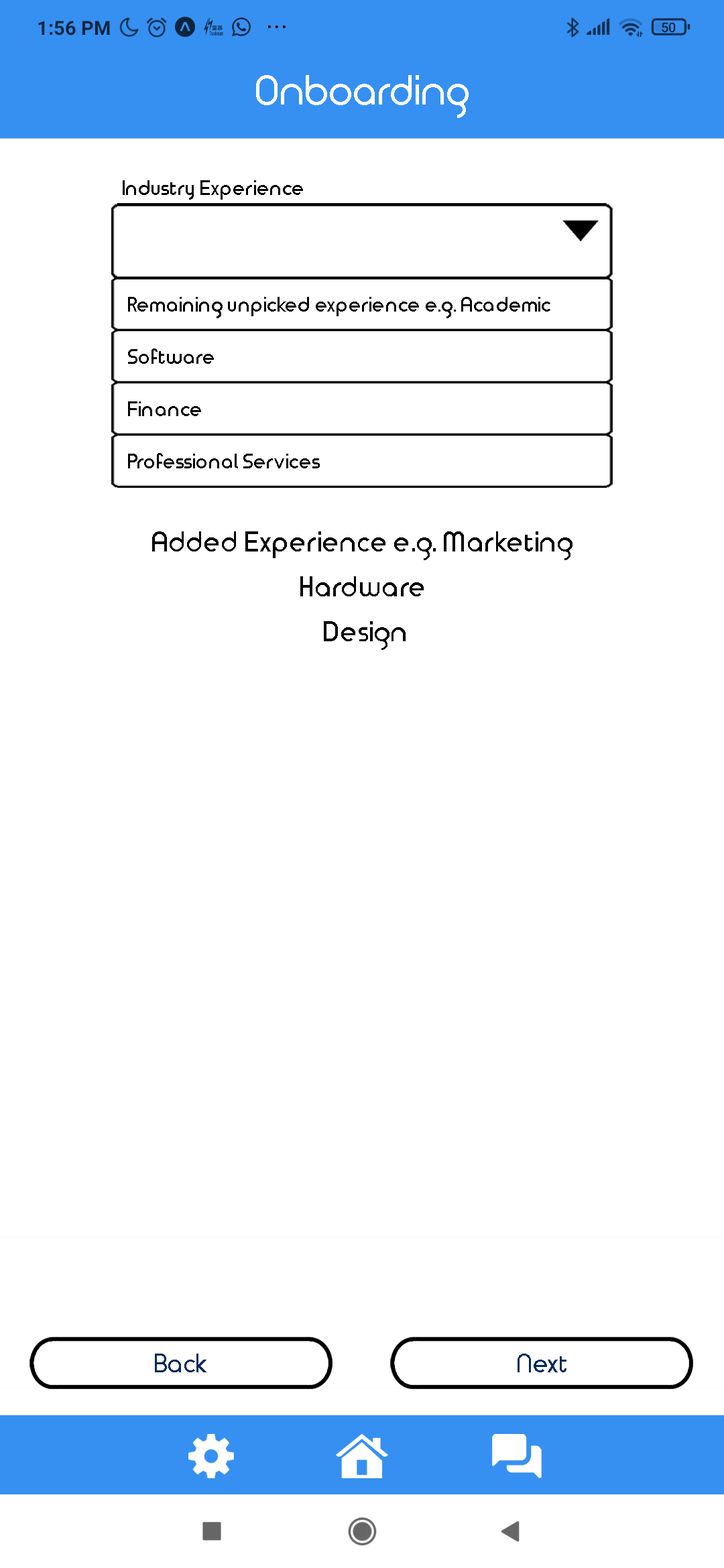
<style>
.page{position:relative;width:724px;height:1568px;background:#ffffff}
.page>*{position:absolute;margin:0}
.t1{font:20.1px "TimeBurner-Bold";color:#000000}
.t2{font:27.5px "TimeBurner-Bold";color:#000000}
</style>
<div class="page">
<p class="t1" style="left:123px;top:180px;width:180px;height:20px">Industry Experience</p>
<p class="t1" style="left:128px;top:297px;width:422px;height:21px">Remaining unpicked experience e.g. Academic</p>
<p class="t1" style="left:128px;top:348px;width:86px;height:16px">Software</p>
<p class="t1" style="left:128px;top:401px;width:73px;height:15px">Finance</p>
<p class="t1" style="left:128px;top:453px;width:192px;height:15px">Professional Services</p>
<p class="t2" style="left:152px;top:531px;width:420px;height:29px">Added Experience e.g. Marketing</p>
<p class="t2" style="left:300px;top:576px;width:123px;height:20px">Hardware</p>
<p class="t2" style="left:324px;top:621px;width:81px;height:29px">Design</p>
</div>
